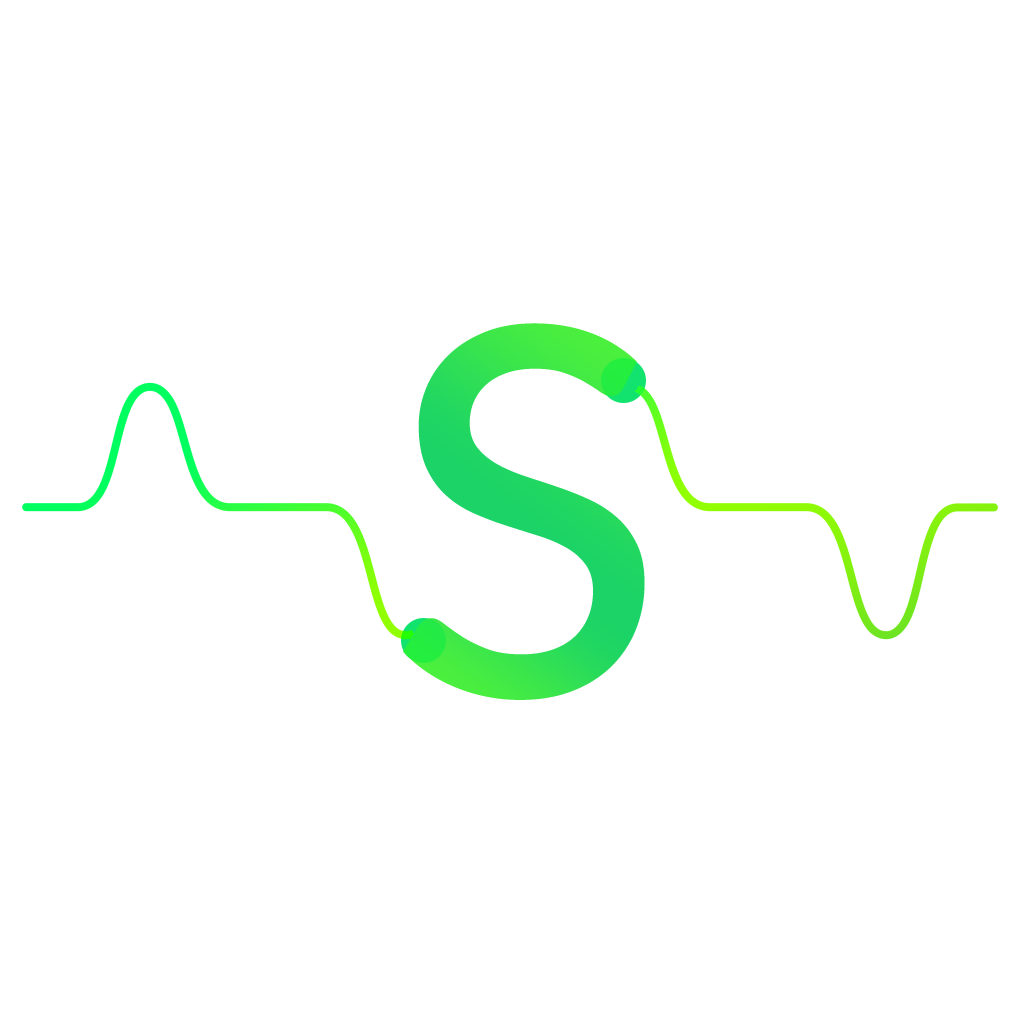
<style>
.page{position:relative;width:1024px;height:1024px;background:#ffffff}
.page>*{position:absolute;margin:0}
.t1{font:512.7px "Lato-Medium";letter-spacing:0.05em}
</style>
<div class="page">
<p class="t1" style="left:403px;top:323px;width:242px;height:377px">S</p>
</div>
